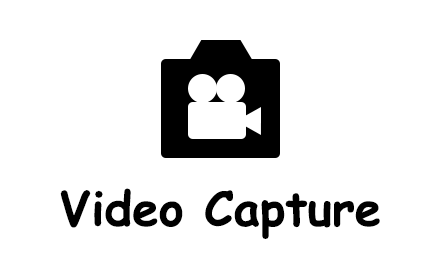
<style>
.page{position:relative;width:440px;height:280px;background:#ffffff}
.page>*{position:absolute;margin:0}
.t1{font:47.3px "ComicSansMS-Bold";color:#000000}
</style>
<div class="page">
<p class="t1" style="left:60px;top:188px;width:320px;height:51px">Video Capture</p>
</div>
